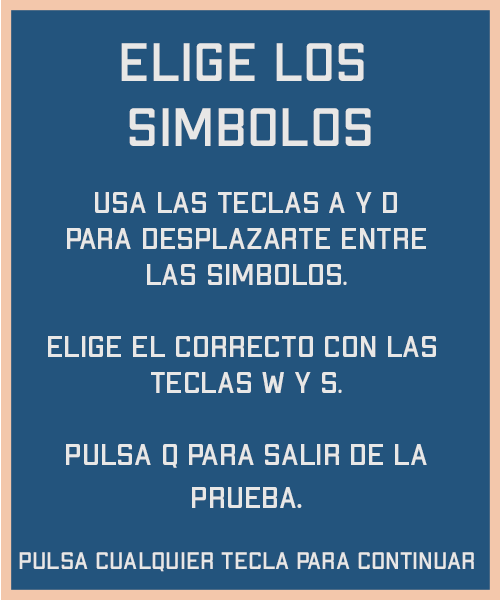
<style>
.page{position:relative;width:500px;height:600px;background:#23547d}
.page>*{position:absolute;margin:0}
.t1{font:54px "ApexMk2-Regular";color:#e8e7e6}
.t2{font:30px "ApexMk2-Regular";color:#e8e7e6}
.t3{font:36px "ApexMk2-Regular";color:#e8e7e6}
.t4{font:24px "ApexMk2-Regular";color:#e8e7e6}
</style>
<div class="page">
<p class="t1" style="left:121px;top:43px;width:250px;height:103px;text-align:center">elige los <br>simbolos</p>
<p class="t2" style="left:48px;top:192px;width:388px;height:316px;text-align:center">usa las teclas a y d<br>para desplazarte entre<br>las simbolos.<br><br>elige el correcto con las <br>teclas w y s.<br><br>pulsa q para salir de la<br>prueba<span class="t3">.</span></p>
<p class="t4" style="left:19px;top:552px;width:455px;height:20px">pulsa cualquier tecla para continuar</p>
</div>
